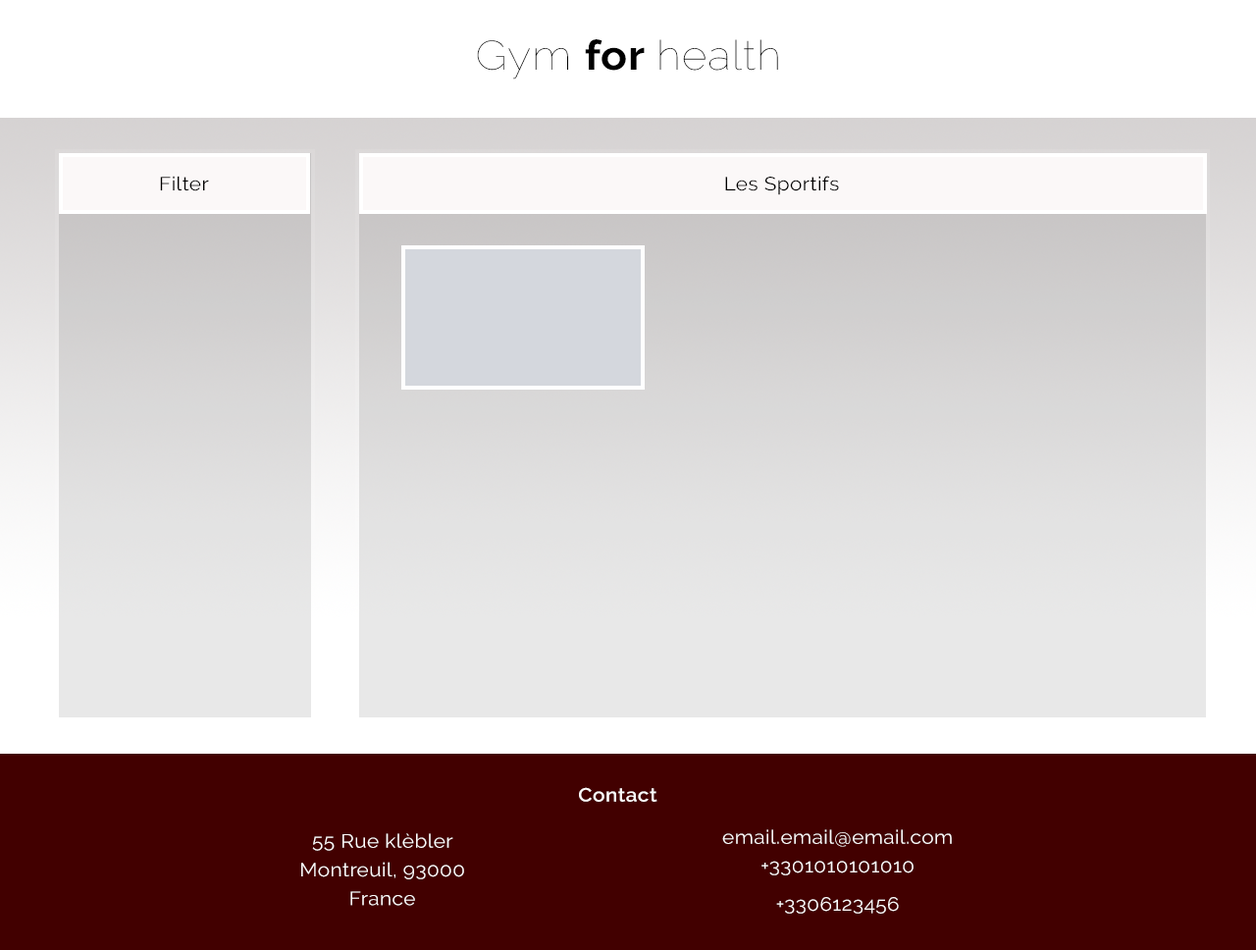
<style>
.page{position:relative;width:1256px;height:950px}
.page>*{position:absolute;margin:0}
.t1{font:40.9px "Raleway-Thin";letter-spacing:0.02em;color:#000000;scale:1.07 1}
.t2{font:40.9px "Raleway-Bold";letter-spacing:0.02em;color:#000000;scale:1.07 1}
.t3{font:19.1px "Raleway-Regular";letter-spacing:0.02em;color:#010000;scale:1.07 1}
.t4{font:19.1px "Raleway-SemiBold";letter-spacing:0.02em;color:#fdfafa;scale:1.07 1}
.t5{font:19.1px/9.5px "Raleway-Regular";letter-spacing:0.02em;color:#fdfafa;scale:1.07 1}
</style>
<div class="page">
<p class="t1" style="left:477px;top:39px;width:301px;height:40px">Gym <span class="t2">for </span>health</p>
<p class="t3" style="left:160px;top:176px;width:49px;height:15px">Filter</p>
<p class="t3" style="left:725px;top:176px;width:114px;height:19px">Les Sportifs</p>
<p class="t4" style="left:579px;top:787px;width:78px;height:14px">Contact</p>
<p class="t5" style="left:301px;top:833px;width:163px;height:72px;text-align:center">55 Rue klèbler<br><br><br>Montreuil, 93000<br><br><br>France</p>
<p class="t5" style="left:722px;top:829px;width:230px;height:84px;text-align:center">email.email@email.com<br><br><br>+3301010101010<br><br><br><br>+3306123456</p>
</div>
